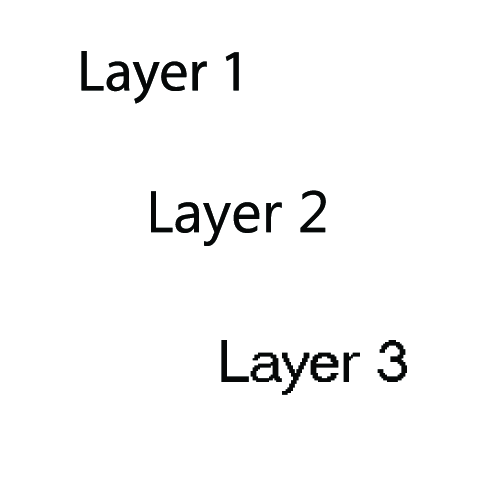
<style>
.page{position:relative;width:500px;height:500px;background:#ffffff}
.page>*{position:absolute;margin:0}
.t1{font:58.3px "MyriadPro-Regular";color:#060808}
.t2{font:58.3px "MicrosoftNewTaiLue";color:#060808}
.t3{font:58.3px "MS Sans Serif";color:#060808}
</style>
<div class="page">
<p class="t1" style="left:81px;top:51px;width:158px;height:53px">Layer 1</p>
<p class="t2" style="left:151px;top:190px;width:175px;height:56px">Layer 2</p>
<p class="t3" style="left:221px;top:340px;width:186px;height:55px">Layer 3</p>
</div>
